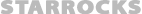
<style>
.page{position:relative;width:142px;height:14px;background:#bbbbbb}
.page>*{position:absolute;margin:0}
.t1{font:20px "Santana-Black";letter-spacing:0.04em;color:#bbbbbb;font-weight:bold;scale:1.08 1}
</style>
<div class="page">
<p class="t1" style="left:1px;top:0px;width:140px;height:15px">STARROCKS</p>
</div>
